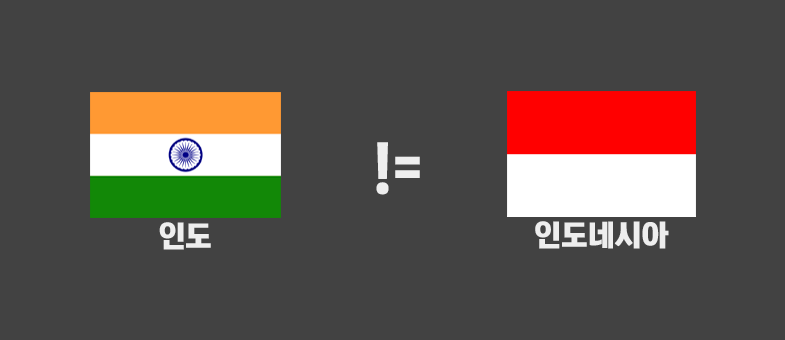
<style>
.page{position:relative;width:785px;height:340px;background:#424242}
.page>*{position:absolute;margin:0}
.t1{font:60px "KoreanTITGD5-R";color:#eeeeee}
.t2{font:30px "KoreanTITGD5-R";color:#eeeeee}
.t3{font:30.1px "KoreanTITGD5-R";color:#eeeeee}
</style>
<div class="page">
<p class="t1" style="left:376px;top:142px;width:44px;height:53px">!=</p>
<p class="t2" style="left:159px;top:222px;width:52px;height:28px">인도</p>
<p class="t3" style="left:535px;top:221px;width:134px;height:28px">인도네시아</p>
</div>
